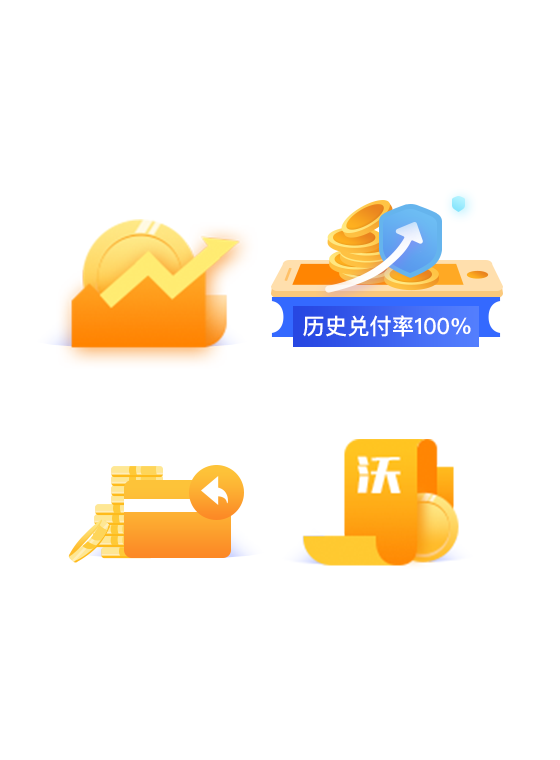
<style>
.page{position:relative;width:560px;height:760px;background:#ffffff}
.page>*{position:absolute;margin:0}
.t1{font:22.3px "PingFangSC-Medium";color:#ffffff}
</style>
<div class="page">
<p class="t1" style="left:303px;top:315px;width:168px;height:22px">历史兑付率100%</p>
</div>
